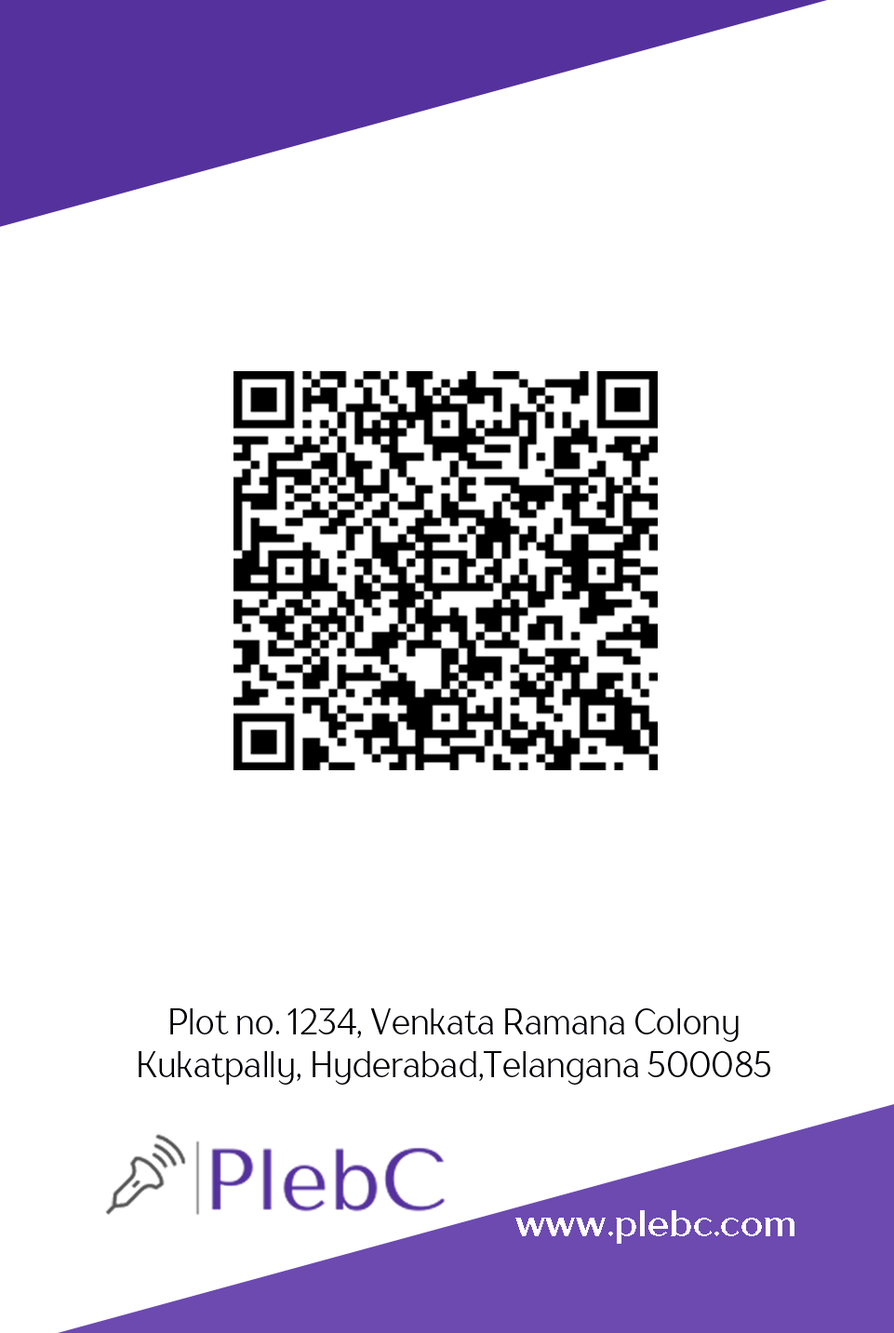
<style>
.page{position:relative;width:894px;height:1333px;background:#ffffff}
.page>*{position:absolute;margin:0}
.t1{font:36.2px "TTDrugsTrial-Regular";color:#020006;scale:0.86 1}
.t2{font:36.2px "TTDrugsTrial-Bold";color:#fefeff}
</style>
<div class="page">
<p class="t1" style="left:139px;top:1009px;width:631px;height:76px;text-align:center">Plot no. 1234, Venkata Ramana Colony<br>Kukatpally, Hyderabad,Telangana 500085</p>
<p class="t2" style="left:516px;top:1211px;width:279px;height:33px">www.plebc.com</p>
</div>
